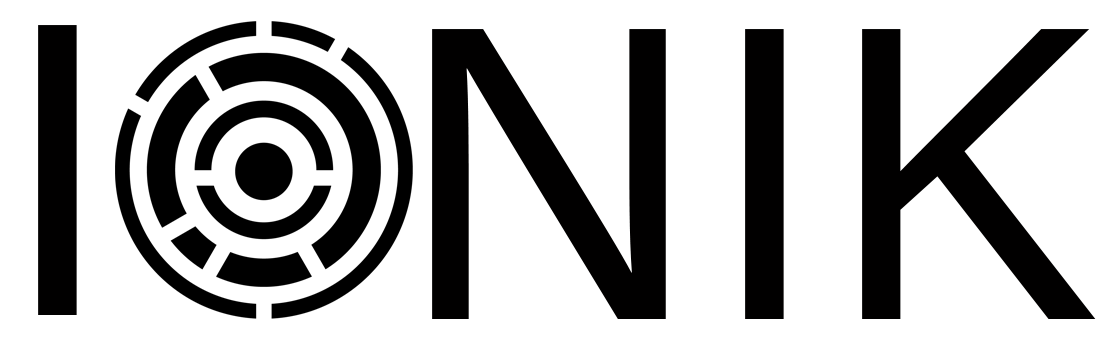
<style>
.page{position:relative;width:1114px;height:355px;background:#ffffff}
.page>*{position:absolute;margin:0}
.t1{font:416.7px "AcuminConcept-Regular";color:#010000}
</style>
<div class="page">
<p class="t1" style="left:38px;top:25px;width:39px;height:290px">I</p>
<p class="t1" style="left:432px;top:29px;width:664px;height:290px">NIK</p>
</div>
